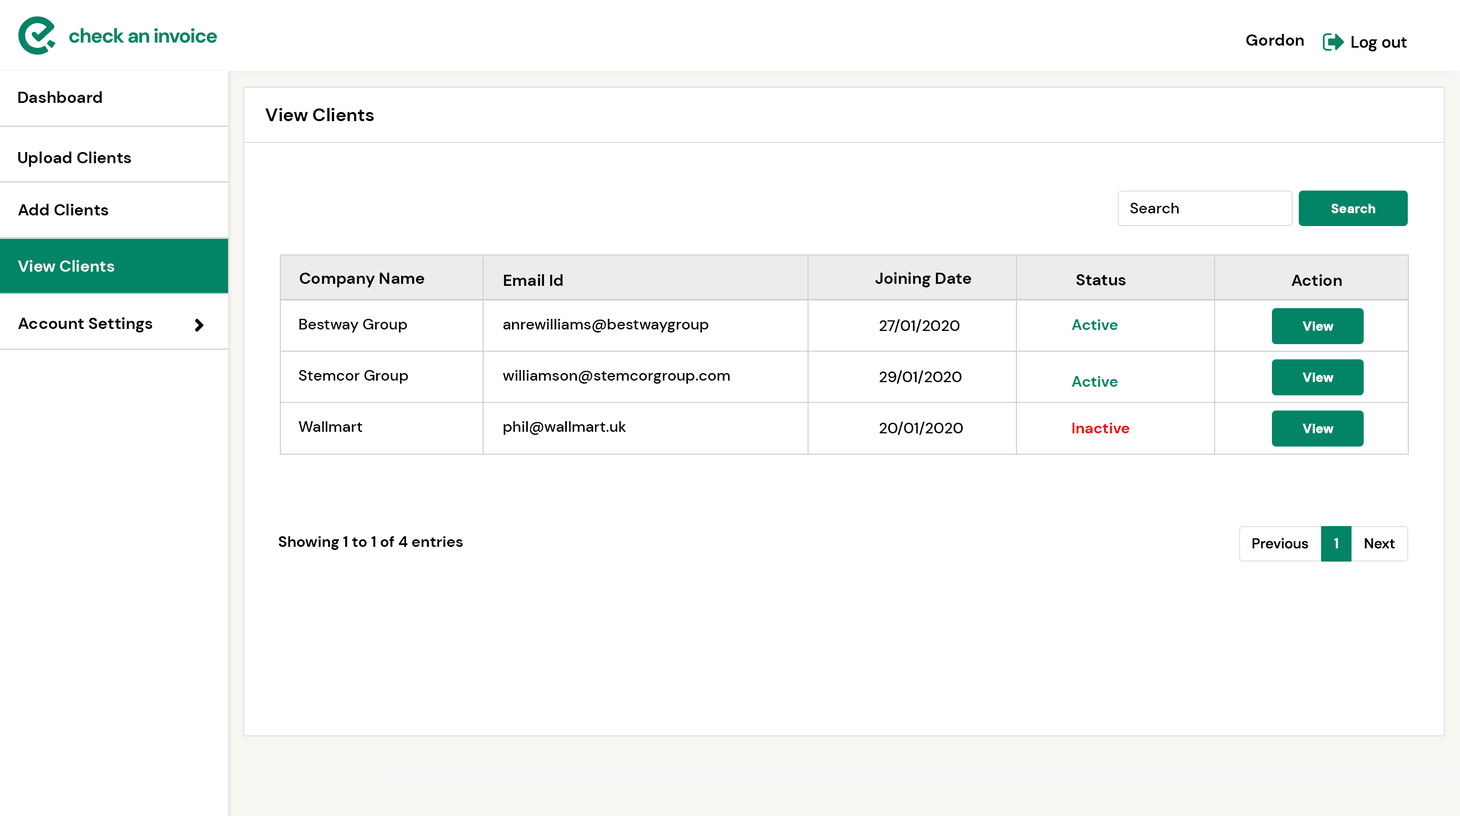
<style>
.page{position:relative;width:1460px;height:816px;background:#ffffff}
.page>*{position:absolute;margin:0}
.t1{font:16.2px "DMSans-Bold";color:#000000}
.t2{font:18.3px "DMSans-Bold";color:#010101}
.t3{font:15.2px "DMSans-Medium";color:#000000}
.t4{font:12.7px "DMSans-Bold";color:#ffffff;font-weight:bold}
.t5{font:16.2px "DMSans-Bold";color:#ffffff}
.t6{font:15.2px "DMSans-Bold";color:#038466}
.t7{font:15.2px "DMSans-Bold";color:#f60404}
.t8{font:15.2px "DMSans-Bold";color:#000000}
</style>
<div class="page">
<p class="t1" style="left:1246px;top:34px;width:58px;height:12px">Gordon</p>
<p class="t1" style="left:18px;top:91px;width:84px;height:12px">Dashboard</p>
<p class="t2" style="left:265px;top:108px;width:109px;height:13px">View Clients</p>
<p class="t1" style="left:18px;top:152px;width:113px;height:15px">Upload Clients</p>
<p class="t1" style="left:18px;top:204px;width:91px;height:12px">Add Clients</p>
<p class="t3" style="left:1130px;top:203px;width:49px;height:10px">Search</p>
<p class="t4" style="left:1332px;top:204px;width:44px;height:9px">Search</p>
<p class="t5" style="left:18px;top:260px;width:97px;height:12px">View Clients</p>
<p class="t1" style="left:300px;top:273px;width:124px;height:15px">Company Name</p>
<p class="t1" style="left:504px;top:274px;width:59px;height:12px">Email Id</p>
<p class="t1" style="left:875px;top:272px;width:97px;height:16px">Joining Date</p>
<p class="t1" style="left:1077px;top:274px;width:49px;height:12px">Status</p>
<p class="t1" style="left:1292px;top:274px;width:50px;height:12px">Action</p>
<p class="t1" style="left:18px;top:317px;width:135px;height:16px">Account Settings</p>
<p class="t3" style="left:299px;top:319px;width:108px;height:14px">Bestway Group</p>
<p class="t3" style="left:504px;top:319px;width:205px;height:14px">anrewilliams@bestwaygroup</p>
<p class="t3" style="left:880px;top:319px;width:80px;height:14px">27/01/2020</p>
<p class="t6" style="left:1072px;top:319px;width:46px;height:11px">Active</p>
<p class="t4" style="left:1303px;top:322px;width:31px;height:9px">View</p>
<p class="t3" style="left:299px;top:370px;width:109px;height:14px">Stemcor Group</p>
<p class="t3" style="left:503px;top:370px;width:227px;height:14px">williamson@stemcorgroup.com</p>
<p class="t3" style="left:880px;top:371px;width:82px;height:13px">29/01/2020</p>
<p class="t6" style="left:1072px;top:376px;width:46px;height:11px">Active</p>
<p class="t4" style="left:1303px;top:373px;width:31px;height:9px">View</p>
<p class="t3" style="left:299px;top:421px;width:64px;height:11px">Wallmart</p>
<p class="t3" style="left:504px;top:421px;width:123px;height:14px">phil@wallmart.uk</p>
<p class="t3" style="left:880px;top:422px;width:84px;height:13px">20/01/2020</p>
<p class="t7" style="left:1073px;top:423px;width:57px;height:11px">Inactive</p>
<p class="t4" style="left:1303px;top:424px;width:31px;height:10px">View</p>
<p class="t8" style="left:278px;top:537px;width:185px;height:13px">Showing 1 to 1 of 4 entries</p>
</div>
